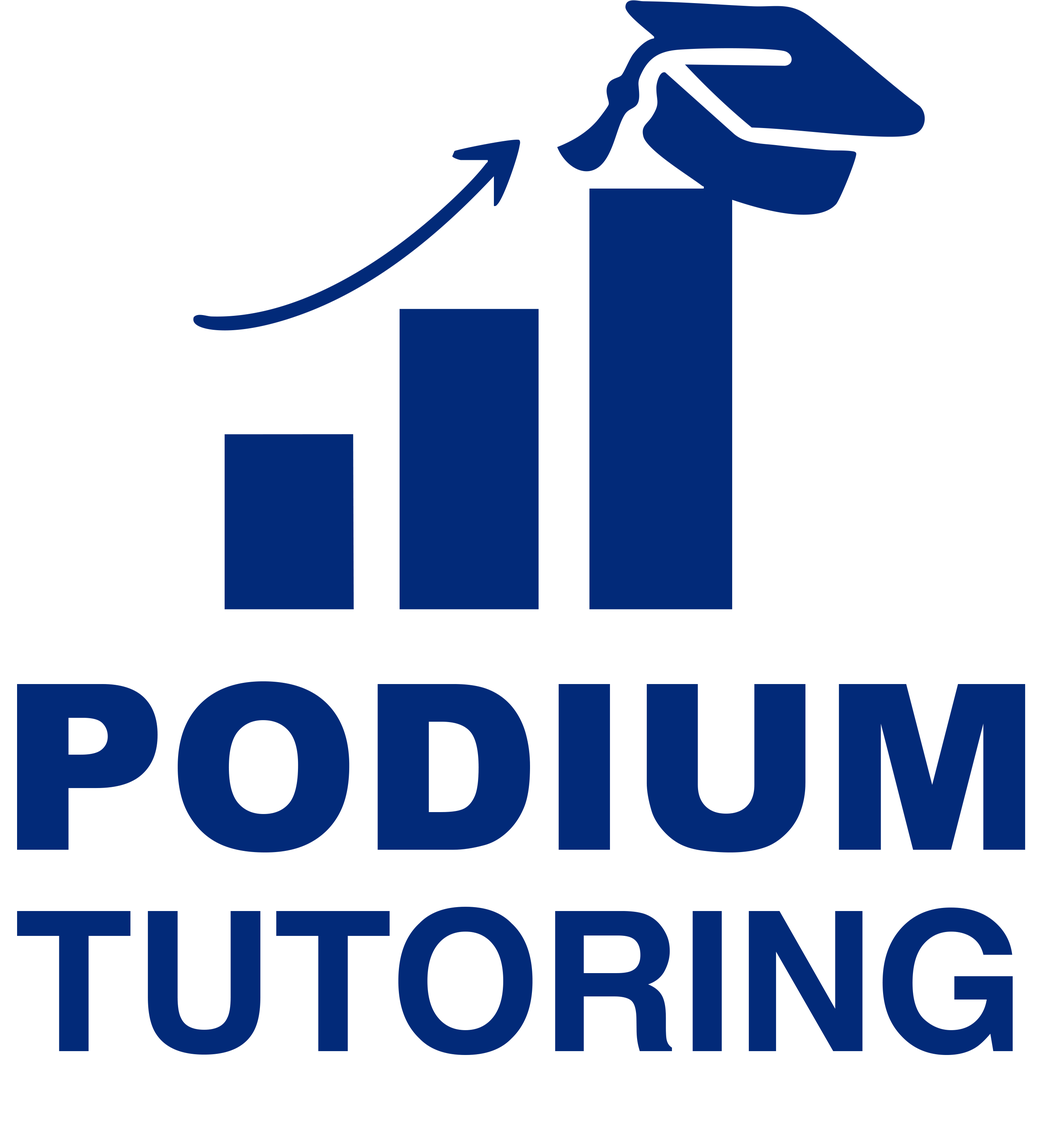
<style>
.page{position:relative;width:1041px;height:1145px;background:#ffffff}
.page>*{position:absolute;margin:0}
.t1{font:231.3px "Arial-Black";color:#022a79}
.t2{font:194.5px "Helvetica-Bold";color:#022a79}
</style>
<div class="page">
<p class="t1" style="left:17px;top:681px;width:1009px;height:172px">PODIUM</p>
<p class="t2" style="left:17px;top:907px;width:996px;height:148px">TUTORING</p>
</div>
